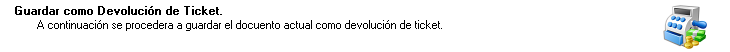
<style>
.page{position:relative;width:730px;height:52px;background:#ffffff}
.page>*{position:absolute;margin:0}
.t1{font:11.4px "MS Sans Serif";color:#000000;font-weight:bold}
.t2{font:11.4px "MS Sans Serif";color:#000000}
</style>
<div class="page">
<p class="t1" style="left:15px;top:6px;width:207px;height:9px">Guardar como Devolución de Ticket.</p>
<p class="t2" style="left:37px;top:20px;width:405px;height:11px">A continuación se procedera a guardar el docuento actual como devolución de ticket.</p>
</div>
